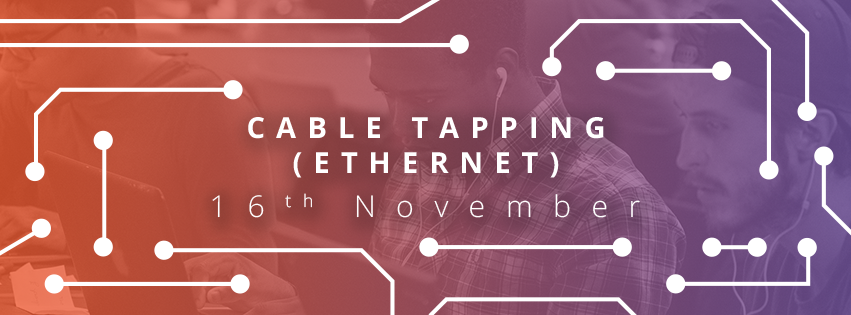
<style>
.page{position:relative;width:851px;height:315px}
.page>*{position:absolute;margin:0}
.t1{font:29px "OpenSans-Bold";letter-spacing:0.38em;color:#ffffff}
.t2{font:30.1px "OpenSans-Light";letter-spacing:0.68em;color:#ffffff}
</style>
<div class="page">
<p class="t1" style="left:248px;top:117px;width:356px;height:61px;text-align:center">CABLE TAPPING (ETHERNET)</p>
<p class="t2" style="left:212px;top:193px;width:428px;height:25px">16th November</p>
</div>
